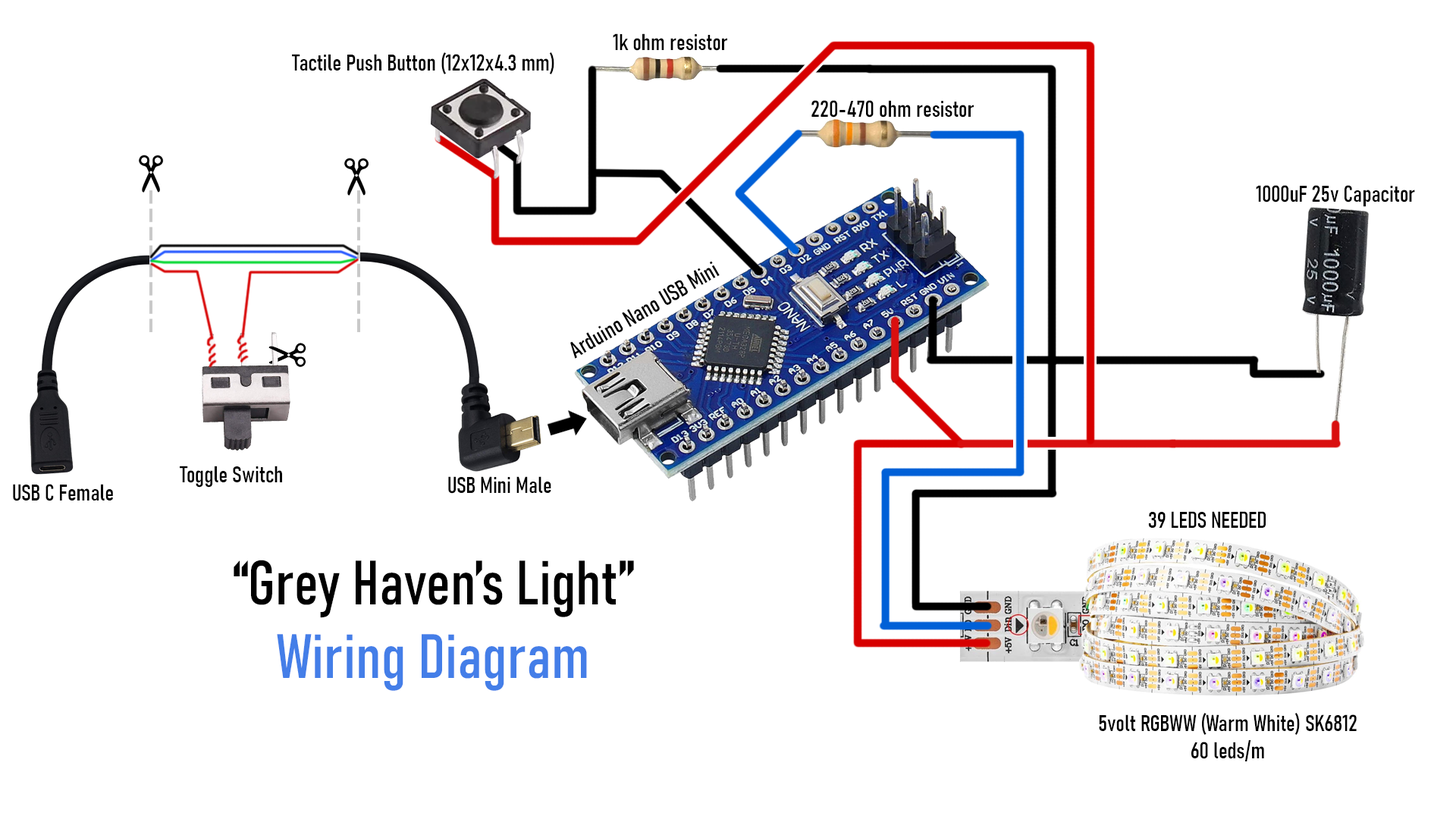
<style>
.page{position:relative;width:1456px;height:819px;background:#ffffff}
.page>*{position:absolute;margin:0}
.t1{font:22.7px "Bahnschrift-Condensed";color:#000000}
.t2{font:61.6px "Bahnschrift-Condensed";color:#000000}
.t3{font:61.6px "Bahnschrift-Condensed";color:#447ee8}
</style>
<div class="page">
<p class="t1" style="left:613px;top:33px;width:114px;height:18px">1k ohm resistor</p>
<p class="t1" style="left:292px;top:52px;width:262px;height:22px">Tactile Push Button (12x12x4.3 mm)</p>
<p class="t1" style="left:811px;top:100px;width:163px;height:18px">220-470 ohm resistor</p>
<p class="t1" style="left:1256px;top:185px;width:159px;height:22px">1000uF 25v Capacitor</p>
<p class="t1" style="left:570px;top:261px;width:150px;height:98px;rotate:-30deg">Arduino Nano USB Mini</p>
<p class="t1" style="left:180px;top:466px;width:102px;height:22px">Toggle Switch</p>
<p class="t1" style="left:13px;top:484px;width:100px;height:17px">USB C Female</p>
<p class="t1" style="left:448px;top:476px;width:103px;height:18px">USB Mini Male</p>
<p class="t1" style="left:1148px;top:511px;width:118px;height:17px">39 LEDS NEEDED</p>
<p class="t2" style="left:234px;top:560px;width:400px;height:131px;text-align:center">“Grey Haven’s Light”<br><span class="t3">Wiring Diagram</span></p>
<p class="t1" style="left:1099px;top:713px;width:258px;height:48px;text-align:center">5volt RGBWW (Warm White) SK6812<br>60 leds/m</p>
</div>
